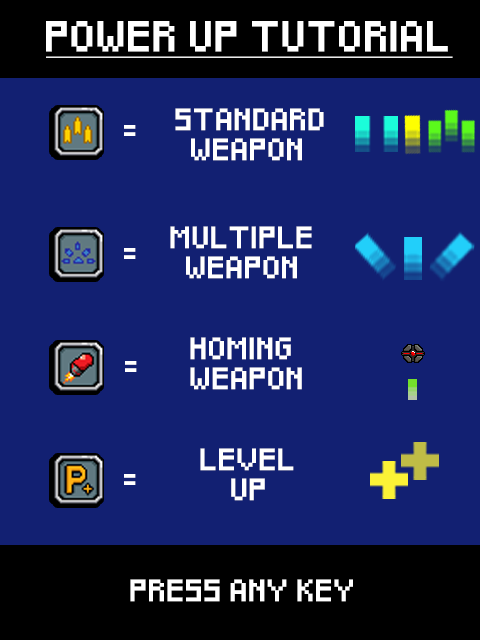
<style>
.page{position:relative;width:480px;height:640px;background:#122072}
.page>*{position:absolute;margin:0}
.t1{font:25px "Pixeled";color:#ffffff;font-weight:bold;text-decoration:underline}
.t2{font:18px/30px "Pixeled";color:#ffffff;font-weight:bold}
.t3{font:18px "Pixeled";color:#ffffff;font-weight:bold}
</style>
<div class="page">
<p class="t1" style="left:46px;top:21px;width:407px;height:37px">POWER UP TUTORIAL</p>
<p class="t2" style="left:175px;top:108px;width:149px;height:53px">STANDARD <br>        WEAPON</p>
<p class="t3" style="left:124px;top:125px;width:12px;height:11px">=</p>
<p class="t2" style="left:170px;top:226px;width:142px;height:53px">MULTIPLE <br>        WEAPON</p>
<p class="t3" style="left:124px;top:248px;width:12px;height:11px">=</p>
<p class="t2" style="left:190px;top:337px;width:112px;height:53px">HOMING <br>      WEAPON</p>
<p class="t3" style="left:125px;top:361px;width:12px;height:11px">=</p>
<p class="t2" style="left:200px;top:448px;width:94px;height:53px">LEVEL<br>          UP</p>
<p class="t3" style="left:124px;top:474px;width:12px;height:11px">=</p>
<p class="t3" style="left:130px;top:579px;width:223px;height:23px">PRESS ANY KEY</p>
</div>
